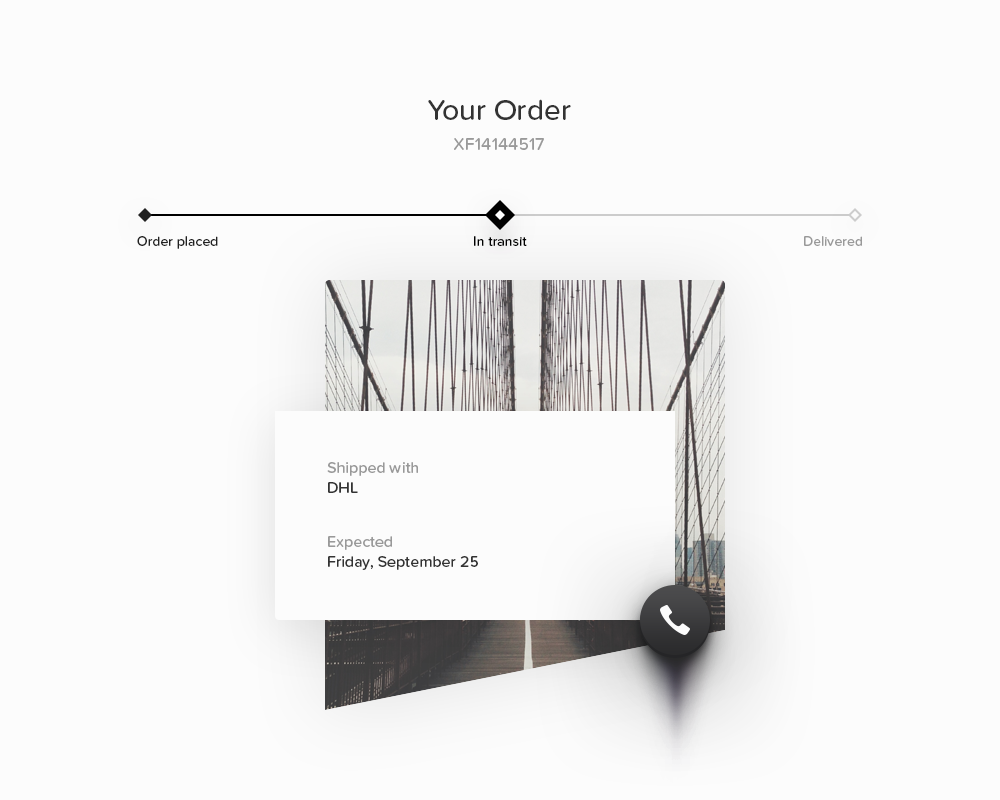
<style>
.page{position:relative;width:1000px;height:800px;background:#fcfcfc}
.page>*{position:absolute;margin:0}
.t1{font:30px "ProximaNovaSoft-Medium";color:#333333}
.t2{font:18px "ProximaNovaSoft-Medium";color:#999999}
.t3{font:14px "ProximaNovaSoft-Medium";color:#212121}
.t4{font:14px "ProximaNovaSoft-Medium";color:#000000}
.t5{font:14px "ProximaNovaSoft-Medium";color:#999999}
.t6{font:16px "ProximaNovaSoft-Medium";color:#999999}
.t7{font:16px "ProximaNovaSoft-Medium";color:#333333}
</style>
<div class="page">
<p class="t1" style="left:428px;top:99px;width:143px;height:21px">Your Order</p>
<p class="t2" style="left:454px;top:138px;width:90px;height:12px">XF14144517</p>
<p class="t3" style="left:137px;top:236px;width:81px;height:13px">Order placed</p>
<p class="t4" style="left:474px;top:236px;width:53px;height:10px">In transit</p>
<p class="t5" style="left:804px;top:236px;width:58px;height:10px">Delivered</p>
<p class="t6" style="left:327px;top:462px;width:91px;height:14px">Shipped with</p>
<p class="t7" style="left:328px;top:482px;width:30px;height:11px">DHL</p>
<p class="t6" style="left:328px;top:536px;width:64px;height:14px">Expected</p>
<p class="t7" style="left:328px;top:556px;width:150px;height:14px">Friday, September 25</p>
</div>
